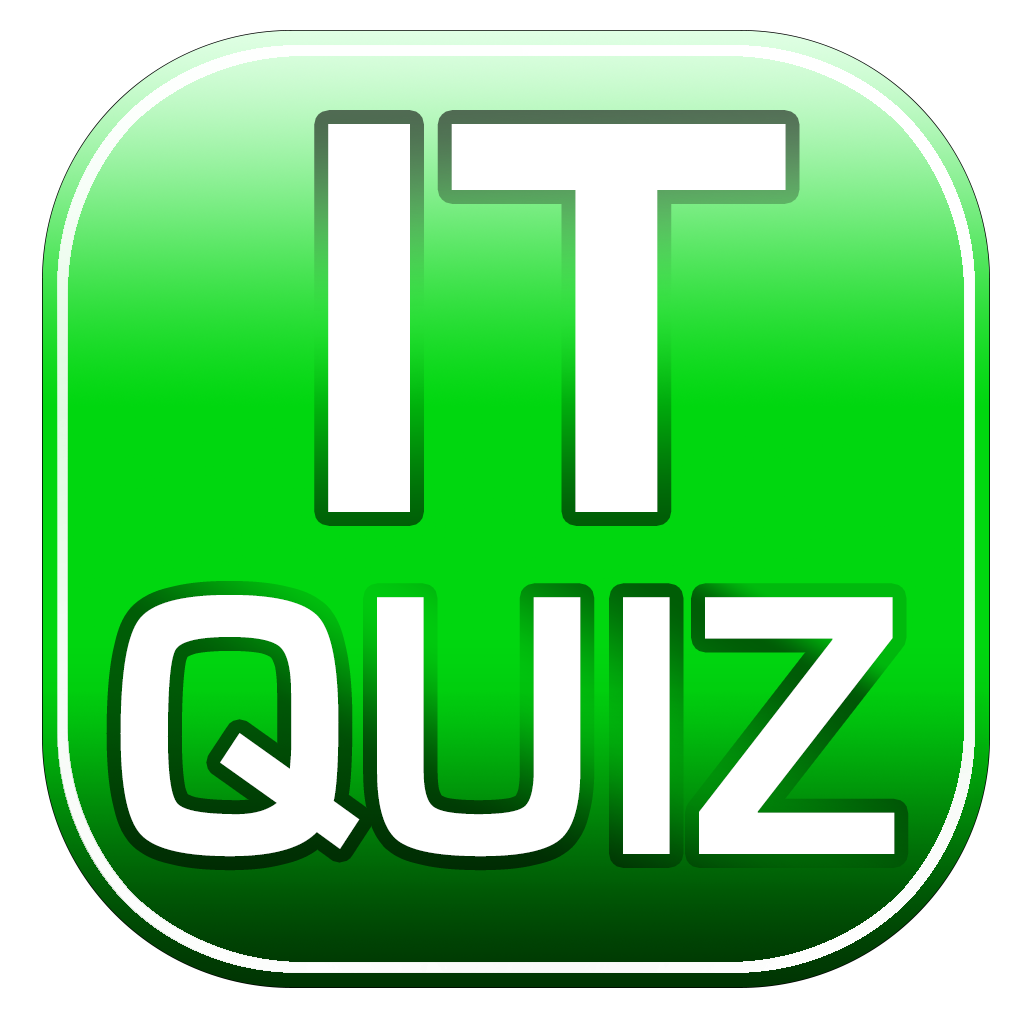
<style>
.page{position:relative;width:1024px;height:1024px;background:#ffffff}
.page>*{position:absolute;margin:0}
.t1{font:582.4px "EurostileBold";color:#ffffff;scale:1.11 1}
.t2{font:384.9px "EurostileBold";color:#ffffff;scale:0.95 1}
</style>
<div class="page">
<p class="t1" style="left:328px;top:124px;width:458px;height:388px">IT</p>
<p class="t2" style="left:120px;top:595px;width:775px;height:262px">QUIZ</p>
</div>
